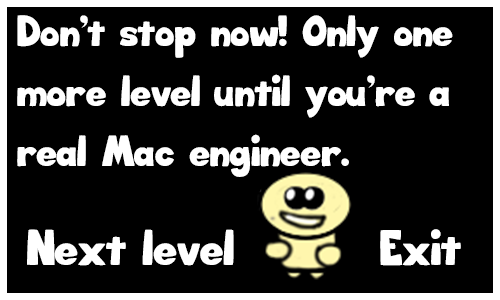
<style>
.page{position:relative;width:500px;height:300px;background:#000000}
.page>*{position:absolute;margin:0}
.t1{font:26px/60px "Big_Bottom_Cartoon";color:#ffffff}
.t2{font:30px "Big_Bottom_Cartoon";color:#ffffff}
.t3{font:29.8px "Big_Bottom_Cartoon";color:#ffffff}
</style>
<div class="page">
<p class="t1" style="left:17px;top:15px;width:436px;height:162px">Don’t stop now! Only one more level until you’re a real Mac engineer.</p>
<p class="t2" style="left:27px;top:229px;width:207px;height:37px">Next level</p>
<p class="t3" style="left:380px;top:229px;width:81px;height:37px">Exit</p>
</div>
